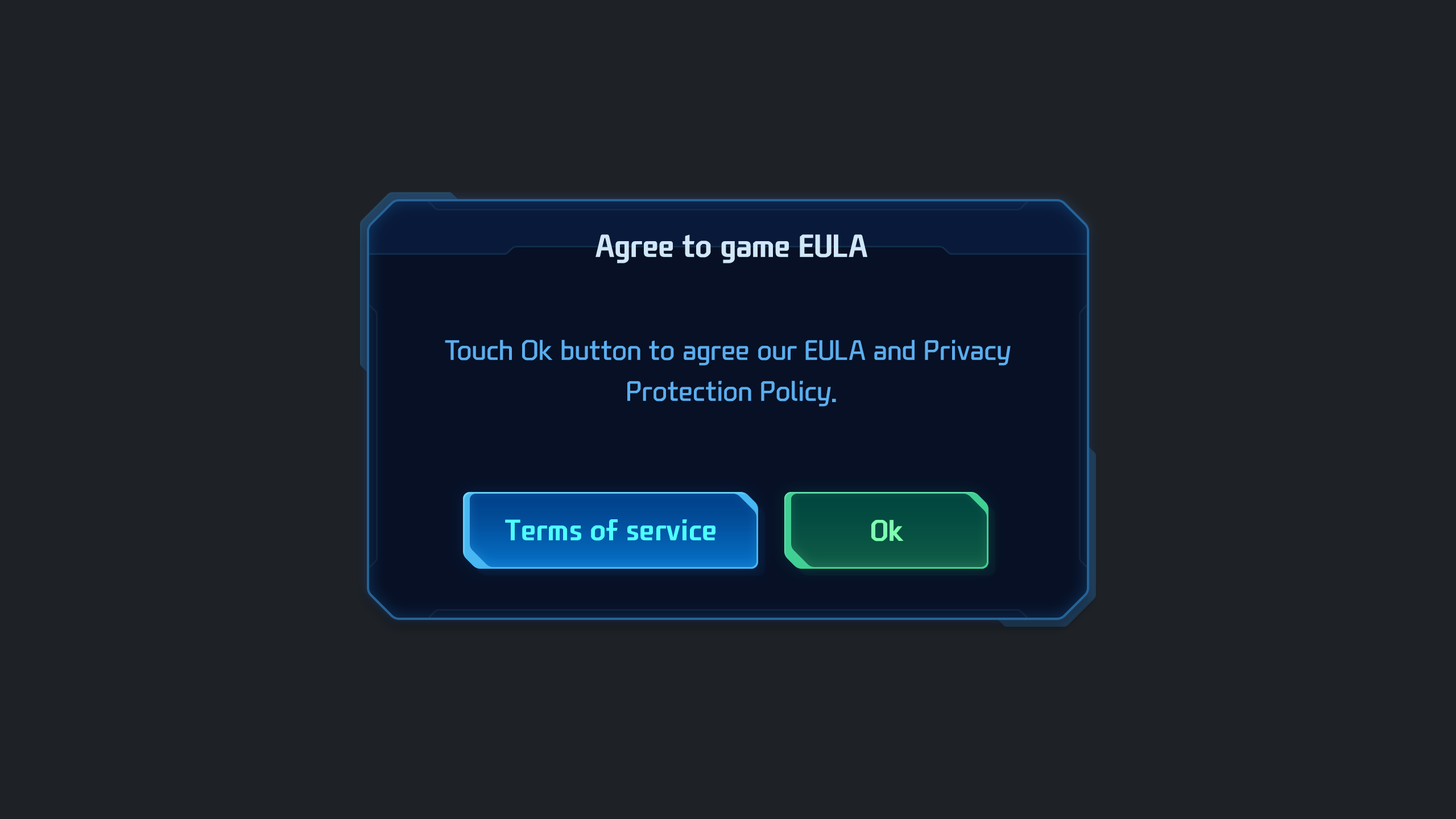
<style>
.page{position:relative;width:1456px;height:819px;background:#1e2227}
.page>*{position:absolute;margin:0}
.t1{font:30.7px "NEXONFootballGothicB";color:#cfe7f7}
.t2{font:27.3px/40.9px "NEXONFootballGothicL";color:#5baeee}
.t3{font:28.4px "NEXONFootballGothicB";color:#4efefe}
.t4{font:28.4px "NEXONFootballGothicB";color:#7effb1}
</style>
<div class="page">
<p class="t1" style="left:595px;top:234px;width:272px;height:29px">Agree to game EULA</p>
<p class="t2" style="left:445px;top:340px;width:566px;height:67px;text-align:center">Touch Ok button to agree our EULA and Privacy <br>Protection Policy.</p>
<p class="t3" style="left:505px;top:519px;width:210px;height:22px">Terms of service</p>
<p class="t4" style="left:871px;top:520px;width:33px;height:21px">Ok</p>
</div>
